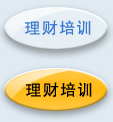
<style>
.page{position:relative;width:113px;height:122px;background:#dfeaf1}
.page>*{position:absolute;margin:0}
.t1{font:16px "SimHei";letter-spacing:0.08em;color:#3a79cf}
.t2{font:16px "SimHei";letter-spacing:0.08em;color:#000000}
</style>
<div class="page">
<p class="t1" style="left:25px;top:20px;width:66px;height:16px">理财培训</p>
<p class="t2" style="left:26px;top:82px;width:66px;height:16px">理财培训</p>
</div>
